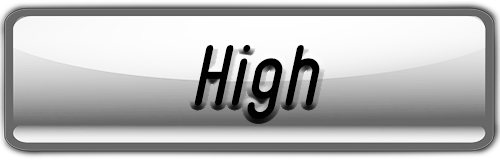
<style>
.page{position:relative;width:500px;height:162px}
.page>*{position:absolute;margin:0}
.t1{font:56px "BubbleBoy2";color:#000000}
</style>
<div class="page">
<p class="t1" style="left:194px;top:45px;width:126px;height:74px">High</p>
</div>
